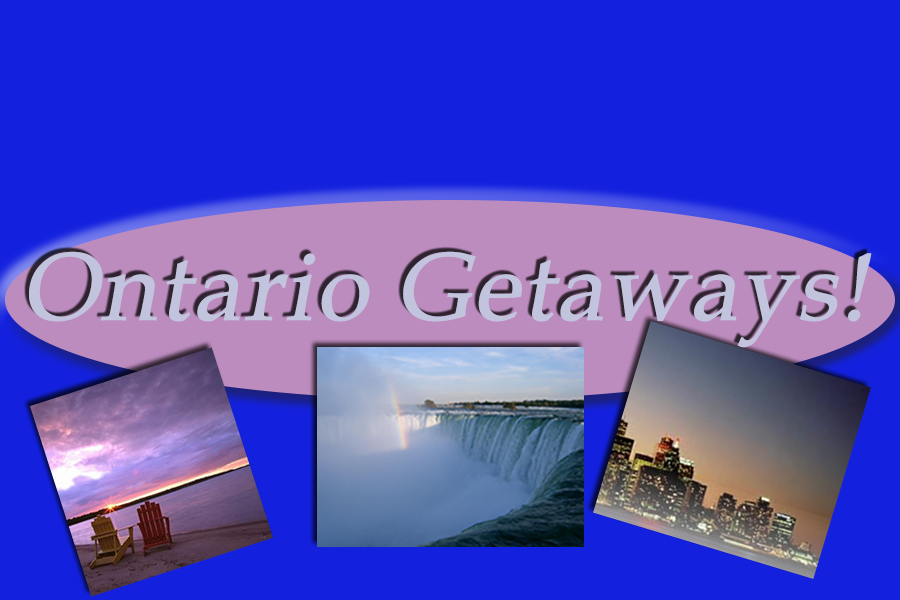
<style>
.page{position:relative;width:900px;height:600px;background:#1321de}
.page>*{position:absolute;margin:0}
.t1{font:96px "BookAntiqua";color:#c2c4de;font-weight:bold;font-style:italic}
</style>
<div class="page">
<p class="t1" style="left:29px;top:251px;width:843px;height:97px">Ontario Getaways!</p>
</div>
